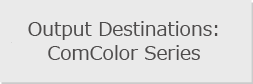
<style>
.page{position:relative;width:253px;height:84px;background:#eaeaea}
.page>*{position:absolute;margin:0}
.t1{font:19px/24px "Meiryo";color:#4e4c4c}
</style>
<div class="page">
<p class="t1" style="left:28px;top:21px;width:190px;height:39px;text-align:center">Output Destinations:<br>ComColor Series</p>
</div>
